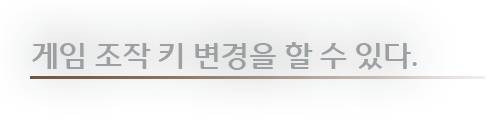
<style>
.page{position:relative;width:493px;height:121px}
.page>*{position:absolute;margin:0}
.t1{font:29.2px "WooridaumR";color:#9ca0a2}
</style>
<div class="page">
<p class="t1" style="left:32px;top:42px;width:385px;height:28px">게임 조작 키 변경을 할 수 있다.</p>
</div>
